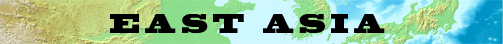
<style>
.page{position:relative;width:503px;height:44px}
.page>*{position:absolute;margin:0}
.t1{font:25.6px "BlackoakStd";letter-spacing:0.3em;color:#000000;scale:0.66 1}
</style>
<div class="page">
<p class="t1" style="left:110px;top:14px;width:275px;height:19px">EAST ASIA</p>
</div>
